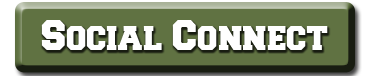
<style>
.page{position:relative;width:367px;height:76px;background:#607242}
.page>*{position:absolute;margin:0}
.t1{font:36px "Freshman";color:#ffffff}
</style>
<div class="page">
<p class="t1" style="left:41px;top:20px;width:287px;height:30px">Social Connect</p>
</div>
